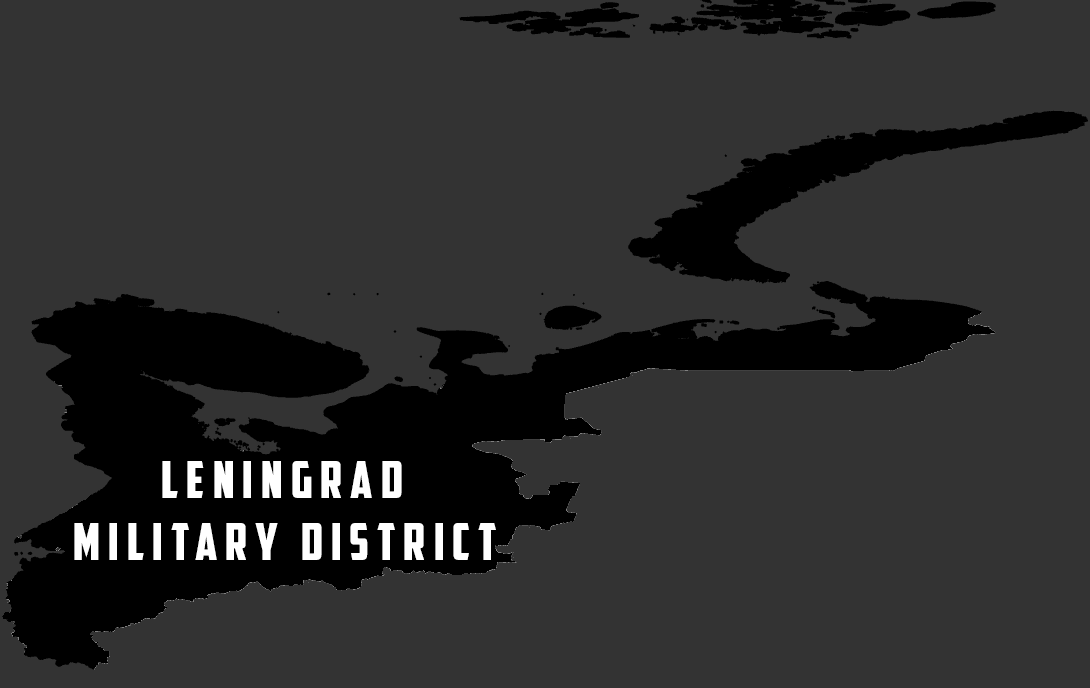
<style>
.page{position:relative;width:1090px;height:688px;background:#333333}
.page>*{position:absolute;margin:0}
.t1{font:51px "AmericanCaptain";letter-spacing:0.16em;color:#ffffff}
</style>
<div class="page">
<p class="t1" style="left:74px;top:461px;width:422px;height:99px;text-align:center">leningrad <br>military district</p>
</div>
